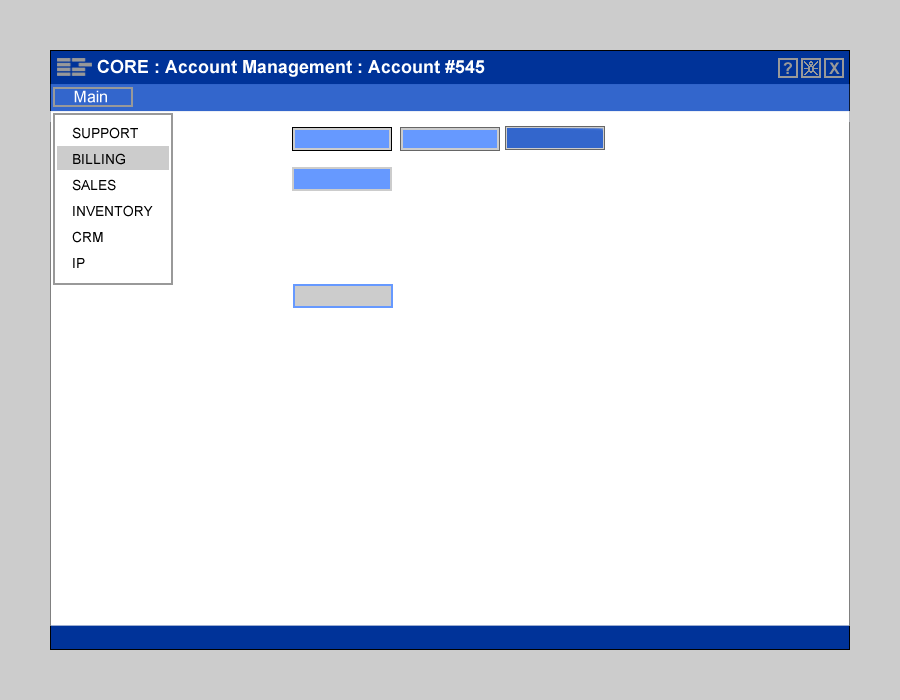
<style>
.page{position:relative;width:900px;height:700px;background:#ffffff}
.page>*{position:absolute;margin:0}
.t1{font:18px "Arial-BoldMT";color:#ffffff}
.t2{font:14px/26px "ArialMT";color:#000000}
</style>
<div class="page">
<p class="t1" style="left:97px;top:59px;width:388px;height:18px">CORE : Account Management : Account #545</p>
<p class="t2" style="left:72px;top:127px;width:81px;height:141px">SUPPORT<br>BILLING<br>SALES<br>INVENTORY<br>CRM<br>IP</p>
</div>
